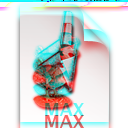
<style>
.page{position:relative;width:128px;height:128px}
.page>*{position:absolute;margin:0}
.t1{font:18px "LucidaGrande-Bold";letter-spacing:-0.02em}
</style>
<div class="page">
<p class="t1" style="left:45px;top:101px;width:39px;height:13px">MAX</p>
</div>
